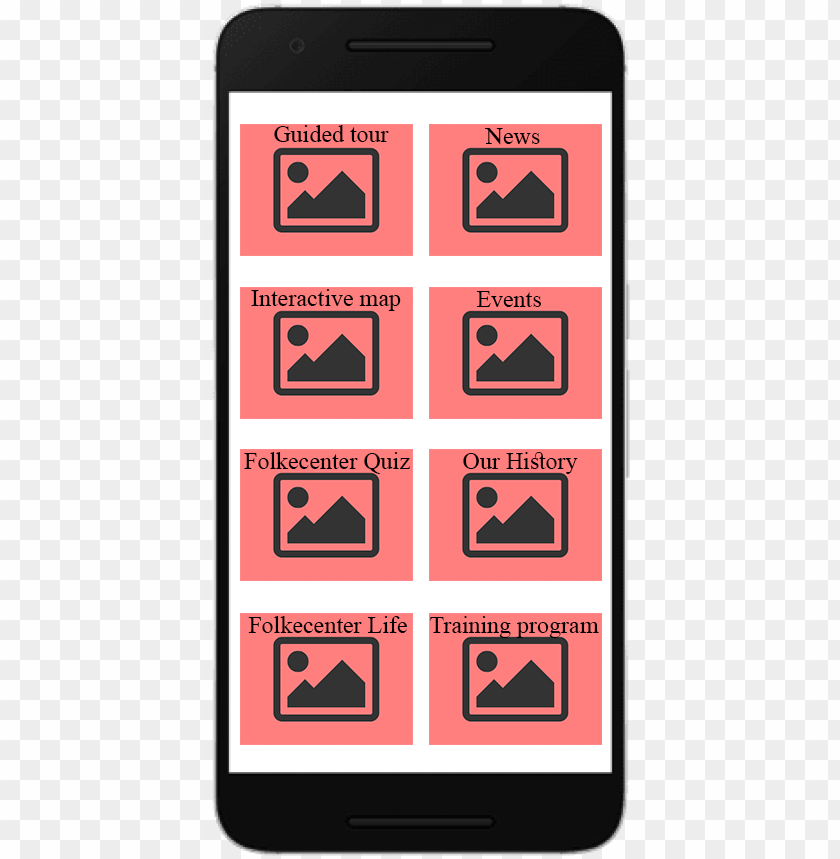
<style>
.page{position:relative;width:840px;height:859px;background:#fefefe}
.page>*{position:absolute;margin:0}
.t1{font:24px "TimesNewRomanPSMT";color:#000000}
</style>
<div class="page">
<p class="t1" style="left:274px;top:125px;width:115px;height:17px">Guided tour</p>
<p class="t1" style="left:485px;top:128px;width:55px;height:17px">News</p>
<p class="t1" style="left:251px;top:289px;width:150px;height:22px">Interactive map</p>
<p class="t1" style="left:476px;top:291px;width:65px;height:16px">Events</p>
<p class="t1" style="left:244px;top:452px;width:166px;height:22px">Folkecenter Quiz</p>
<p class="t1" style="left:463px;top:452px;width:115px;height:22px">Our History</p>
<p class="t1" style="left:248px;top:616px;width:159px;height:17px">Folkecenter Life</p>
<p class="t1" style="left:430px;top:616px;width:169px;height:22px">Training program</p>
</div>
